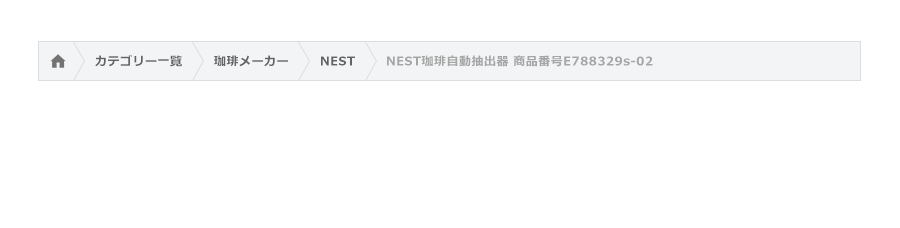
<style>
.page{position:relative;width:900px;height:228px;background:#ffffff}
.page>*{position:absolute;margin:0}
.t1{font:12px "Meiryo-Bold";letter-spacing:0.04em;color:#626365}
.t2{font:12px "Meiryo-Bold";letter-spacing:0.04em;color:#a5a5a5}
</style>
<div class="page">
<p class="t1" style="left:95px;top:54px;width:87px;height:13px">カテゴリー一覧</p>
<p class="t1" style="left:214px;top:55px;width:74px;height:12px">珈琲メーカー</p>
<p class="t1" style="left:321px;top:56px;width:34px;height:10px">NEST</p>
<p class="t2" style="left:387px;top:55px;width:266px;height:12px">NEST珈琲自動抽出器 商品番号E788329s-02</p>
</div>
